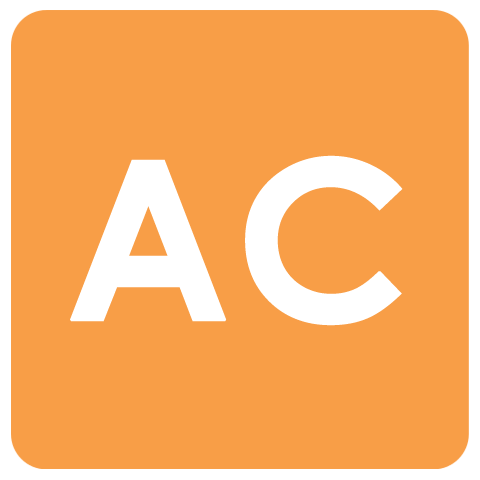
<style>
.page{position:relative;width:480px;height:480px;background:#f89e47}
.page>*{position:absolute;margin:0}
.t1{font:221.7px "CenturyGothic-Bold";color:#ffffff;font-weight:bold}
</style>
<div class="page">
<p class="t1" style="left:70px;top:155px;width:333px;height:171px">AC</p>
</div>
